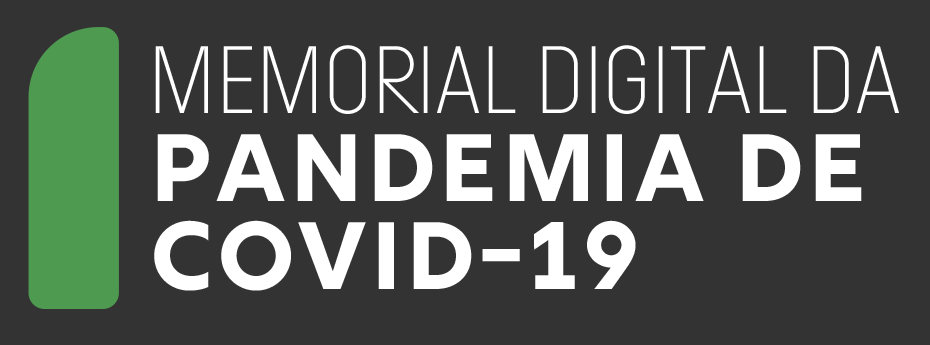
<style>
.page{position:relative;width:930px;height:345px;background:#333333}
.page>*{position:absolute;margin:0}
.t1{font:95.5px/84px "Rig-BoldFace";color:#ffffff}
.t2{font:95.5px/84px "Ladislav-Light";color:#ffffff}
</style>
<div class="page">
<p class="t1" style="left:154px;top:45px;width:745px;height:246px"><span class="t2">MEMORIAL DIGITAL DA<br></span>PANDEMIA DE<br>COVID-19</p>
</div>
